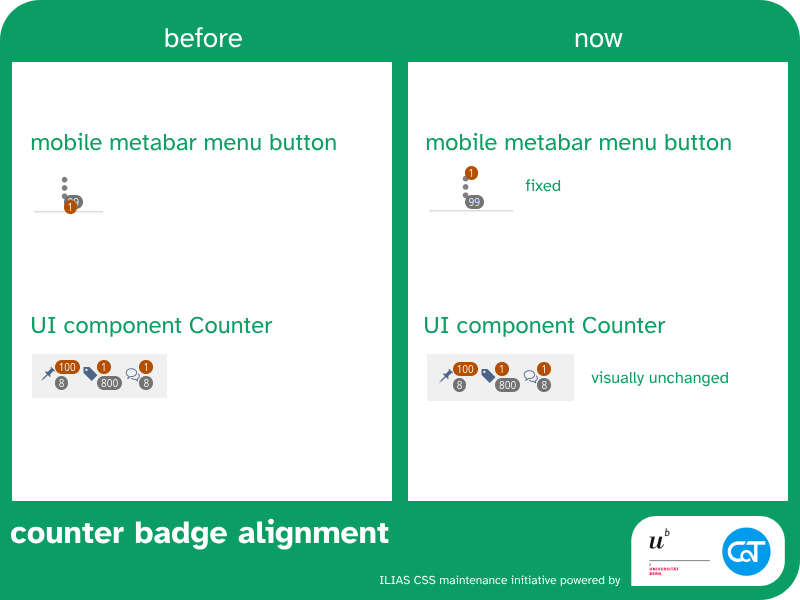
<style>
.page{position:relative;width:800px;height:600px;background:#ffffff}
.page>*{position:absolute;margin:0}
.t1{font:28px "AtkinsonHyperlegible-Regular";color:#ffffff}
.t2{font:24px "AtkinsonHyperlegible-Regular";color:#0a9d64}
.t3{font:16.6px "AtkinsonHyperlegible-Regular";color:#0a9d64}
.t4{font:32.1px "AtkinsonHyperlegible-Bold";color:#ffffff}
.t5{font:12px "AtkinsonHyperlegible-Regular";color:#ffffff}
</style>
<div class="page">
<p class="t1" style="left:165px;top:27px;width:78px;height:21px">before</p>
<p class="t1" style="left:575px;top:32px;width:48px;height:16px">now</p>
<p class="t2" style="left:31px;top:132px;width:305px;height:19px">mobile metabar menu button</p>
<p class="t2" style="left:426px;top:132px;width:305px;height:19px">mobile metabar menu button</p>
<p class="t3" style="left:525px;top:179px;width:36px;height:13px">fixed</p>
<p class="t2" style="left:32px;top:316px;width:241px;height:21px">UI component Counter</p>
<p class="t2" style="left:425px;top:316px;width:241px;height:21px">UI component Counter</p>
<p class="t3" style="left:591px;top:371px;width:138px;height:16px">visually unchanged</p>
<p class="t4" style="left:10px;top:518px;width:379px;height:32px">counter badge alignment</p>
<p class="t5" style="left:380px;top:575px;width:241px;height:11px">ILIAS CSS maintenance initiative powered by</p>
</div>
